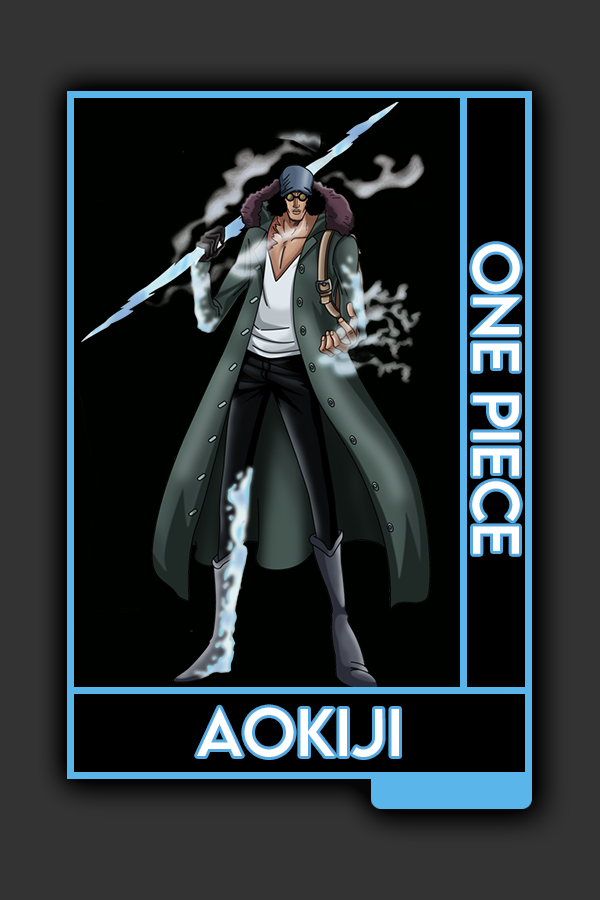
<style>
.page{position:relative;width:600px;height:900px;background:#000200}
.page>*{position:absolute;margin:0}
.t1{font:58.4px "LEMONMILK-Regular";color:#ffffff}
.t2{font:60.3px "LEMONMILK-Regular";color:#ffffff}
</style>
<div class="page">
<p class="t1" style="left:472px;top:244px;width:48px;height:310px;rotate:90deg">One Piece</p>
<p class="t2" style="left:197px;top:707px;width:202px;height:50px">Aokiji</p>
</div>
